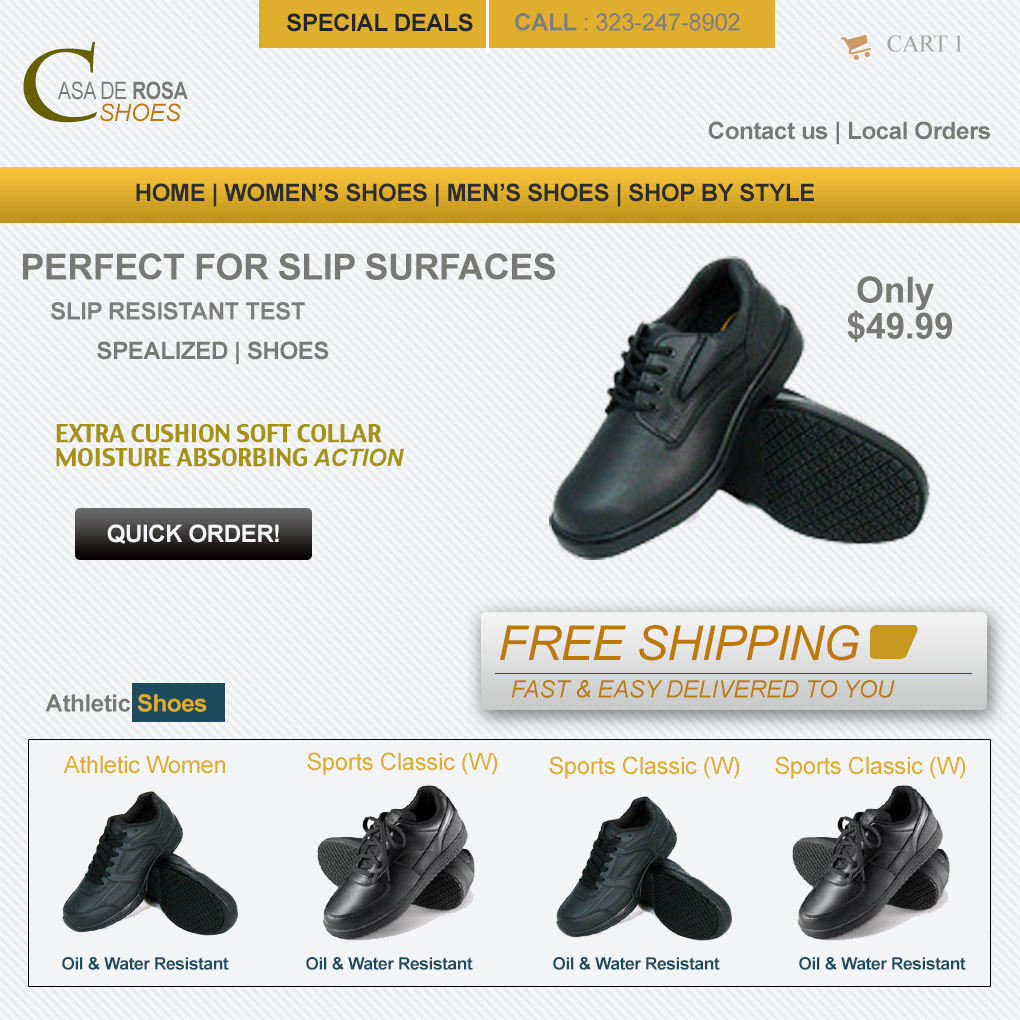
<style>
.page{position:relative;width:1020px;height:1020px}
.page>*{position:absolute;margin:0}
.t1{font:24px "Arial-BoldMT";letter-spacing:-0.015em;color:#202629}
.t2{font:24px "ArialMT";letter-spacing:-0.015em;color:#7e7f7c}
.t3{font:24px "Arial-BoldMT";letter-spacing:-0.015em;color:#7e7f7c}
.t4{font:100.7px "CharlemagneStd-Bold";letter-spacing:-0.015em;color:#675f04}
.t5{font:24px "TimesNewRomanPSMT";letter-spacing:-0.015em;color:#a2a2a1}
.t6{font:24px "ArialNarrow";letter-spacing:-0.015em;color:#787875}
.t7{font:24px "ArialNarrow-Bold";letter-spacing:-0.015em;color:#787875}
.t8{font:24px "Arial-ItalicMT";letter-spacing:-0.015em;color:#bc7904}
.t9{font:24px "Arial-BoldMT";letter-spacing:-0.015em;color:#787875}
.t10{font:24px "Arial-BoldMT";letter-spacing:-0.015em;color:#2c2d2f}
.t11{font:36px "Arial-BoldMT";letter-spacing:-0.015em;color:#787875}
.t12{font:36px/36px "Arial-BoldMT";letter-spacing:-0.015em;color:#787875}
.t13{font:36px/68.1px "Arial-BoldMT";letter-spacing:-0.015em;color:#787875}
.t14{font:24px/24px "CharcoalCY";letter-spacing:-0.015em;color:#a69314}
.t15{font:24px/24px "Arial-BoldItalicMT";letter-spacing:-0.015em;color:#a69314}
.t16{font:24px "Arial-BoldMT";letter-spacing:-0.015em;color:#f4f6f7}
.t17{font:48px "Arial-ItalicMT";letter-spacing:-0.015em;color:#bc7904}
.t18{font:24px "Arial-BoldMT";letter-spacing:-0.015em;color:#dfad2c}
.t19{font:24px "ArialMT";letter-spacing:-0.015em;color:#dfad2c}
.t20{font:17px "Arial-BoldMT";letter-spacing:-0.015em;color:#1e4a60}
</style>
<div class="page">
<p class="t1" style="left:287px;top:13px;width:186px;height:19px">SPECIAL DEALS</p>
<p class="t2" style="left:515px;top:13px;width:225px;height:18px"><span class="t3">CALL </span>: 323-247-8902</p>
<p class="t4" style="left:23px;top:41px;width:74px;height:82px">C</p>
<p class="t5" style="left:887px;top:35px;width:75px;height:17px">CART 1</p>
<p class="t6" style="left:58px;top:81px;width:130px;height:19px">ASA DE <span class="t7">ROSA</span></p>
<p class="t8" style="left:100px;top:103px;width:81px;height:19px">SHOES</p>
<p class="t9" style="left:708px;top:121px;width:282px;height:24px">Contact us | Local Orders</p>
<p class="t10" style="left:136px;top:183px;width:678px;height:24px">HOME | WOMEN’S SHOES | MEN’S SHOES | SHOP BY STYLE</p>
<p class="t11" style="left:23px;top:253px;width:532px;height:27px">PERFECT FOR SLIP SURFACES</p>
<p class="t12" style="left:847px;top:276px;width:105px;height:67px;text-align:center"><span class="t13">Only <br></span>$49.99</p>
<p class="t3" style="left:51px;top:302px;width:254px;height:18px">SLIP RESISTANT TEST</p>
<p class="t9" style="left:97px;top:341px;width:232px;height:24px">SPEALIZED | SHOES</p>
<p class="t14" style="left:56px;top:424px;width:348px;height:43px">EXTRA CUSHION SOFT COLLAR<br>MOISTURE ABSORBING <span class="t15">ACTION</span></p>
<p class="t16" style="left:107px;top:524px;width:172px;height:20px">QUICK ORDER!</p>
<p class="t17" style="left:500px;top:625px;width:360px;height:36px">FREE SHIPPING</p>
<p class="t8" style="left:511px;top:680px;width:384px;height:18px">FAST &amp; EASY DELIVERED TO YOU</p>
<p class="t9" style="left:45px;top:694px;width:162px;height:18px">Athletic <span class="t18">Shoes</span></p>
<p class="t19" style="left:63px;top:755px;width:162px;height:19px">Athletic Women</p>
<p class="t19" style="left:307px;top:752px;width:191px;height:23px">Sports Classic (W)</p>
<p class="t19" style="left:549px;top:756px;width:191px;height:23px">Sports Classic (W)</p>
<p class="t19" style="left:775px;top:756px;width:191px;height:23px">Sports Classic (W)</p>
<p class="t20" style="left:62px;top:957px;width:167px;height:13px">Oil &amp; Water Resistant</p>
<p class="t20" style="left:306px;top:957px;width:167px;height:13px">Oil &amp; Water Resistant</p>
<p class="t20" style="left:553px;top:957px;width:167px;height:13px">Oil &amp; Water Resistant</p>
<p class="t20" style="left:799px;top:957px;width:167px;height:13px">Oil &amp; Water Resistant</p>
</div>
